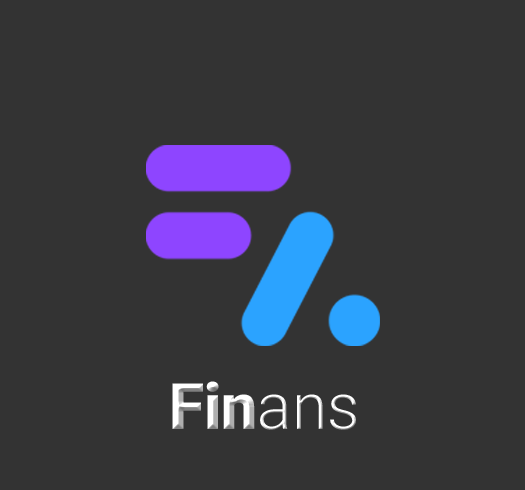
<style>
.page{position:relative;width:525px;height:490px;background:#333333}
.page>*{position:absolute;margin:0}
.t1{font:64px "Roboto-Black"}
.t2{font:64px "Roboto-Light"}
</style>
<div class="page">
<p class="t1" style="left:172px;top:381px;width:184px;height:49px">Fin<span class="t2">ans</span></p>
</div>
